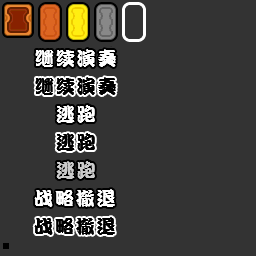
<style>
.page{position:relative;width:256px;height:256px;background:#333333}
.page>*{position:absolute;margin:0}
.t1{font:19px "DFPKanTingLiuW9";letter-spacing:0.1em;color:#ffffff}
.t2{font:19px "DFPKanTingLiuW9";letter-spacing:0.1em;color:#000000}
.t3{font:19px "DFPKanTingLiuW9";letter-spacing:0.1em;color:#cccccc}
</style>
<div class="page">
<p class="t1" style="left:35px;top:49px;width:81px;height:18px">继续演奏</p>
<p class="t2" style="left:35px;top:77px;width:81px;height:18px">继续演奏</p>
<p class="t1" style="left:56px;top:105px;width:39px;height:18px">逃跑</p>
<p class="t2" style="left:56px;top:133px;width:39px;height:18px">逃跑</p>
<p class="t3" style="left:56px;top:161px;width:39px;height:18px">逃跑</p>
<p class="t1" style="left:34px;top:189px;width:81px;height:18px">战略撤退</p>
<p class="t2" style="left:34px;top:217px;width:81px;height:18px">战略撤退</p>
</div>
